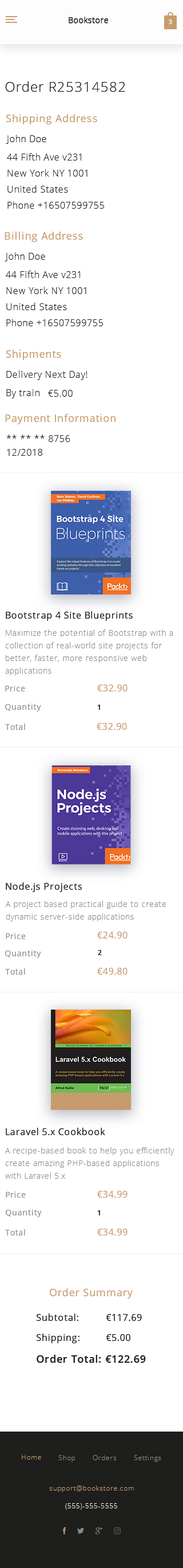
<style>
.page{position:relative;width:183px;height:1568px;background:#ffffff}
.page>*{position:absolute;margin:0}
.t1{font:13.8px "OpenSans-Light";letter-spacing:0.05em;color:#181920}
.t2{font:10.3px "OpenSans";letter-spacing:0.05em;color:#c69c6d}
.t3{font:9.2px/16.1px "OpenSans-Light";letter-spacing:0.05em;color:#1e1e1c}
.t4{font:9.2px/18.3px "OpenSans-Light";letter-spacing:0.05em;color:#1e1e1c}
.t5{font:9.2px/13.8px "OpenSans-Light";letter-spacing:0.05em;color:#1e1e1c}
.t6{font:9.2px "OpenSans-Light";letter-spacing:0.05em;color:#1e1e1c}
.t7{font:9.2px "OpenSans";letter-spacing:0.05em;color:#1e1e1c}
.t8{font:8px/12.6px "OpenSans-Light";letter-spacing:0.05em;color:#8c8c8c}
.t9{font:8px "OpenSans";letter-spacing:0.05em;color:#8c8c8c}
.t10{font:9.2px "OpenSans";letter-spacing:0.05em;color:#c69c6d}
.t11{font:6.9px "OpenSans-Semibold";letter-spacing:0.05em;color:#1e1e1c}
.t12{font:10.3px "OpenSans-Semibold";letter-spacing:0.05em;color:#1e1e1c}
</style>
<div class="page">
<p class="t1" style="left:5px;top:81px;width:121px;height:11px">Order R25314582</p>
<p class="t2" style="left:6px;top:114px;width:91px;height:10px">Shipping Address</p>
<p class="t3" style="left:6px;top:135px;width:98px;height:74px"><span class="t4">John Doe<br>44 Fifth Ave v231<br></span>New York NY 1001<br>United States<br>Phone +16507599755</p>
<p class="t2" style="left:5px;top:232px;width:78px;height:10px">Billing Address</p>
<p class="t3" style="left:5px;top:252px;width:98px;height:74px"><span class="t4">John Doe<br>44 Fifth Ave v231<br></span>New York NY 1001<br>United States<br>Phone +16507599755</p>
<p class="t2" style="left:6px;top:350px;width:55px;height:10px">Shipments</p>
<p class="t5" style="left:6px;top:370px;width:82px;height:28px">Delivery Next Day! <span class="t4"><br>By train</span></p>
<p class="t6" style="left:48px;top:390px;width:25px;height:7px">€5.00</p>
<p class="t2" style="left:5px;top:414px;width:111px;height:10px">Payment Information</p>
<p class="t5" style="left:7px;top:435px;width:63px;height:21px">** ** ** 8756<br>12/2018</p>
<p class="t7" style="left:6px;top:611px;width:127px;height:10px">Bootstrap 4 Site Blueprints</p>
<p class="t8" style="left:5px;top:629px;width:168px;height:46px">Maximize the potential of Bootstrap with a collection of real-world site projects for better, faster, more responsive web applications</p>
<p class="t9" style="left:5px;top:685px;width:20px;height:6px">Price</p>
<p class="t10" style="left:97px;top:685px;width:31px;height:6px">€32.90</p>
<p class="t9" style="left:5px;top:703px;width:36px;height:8px">Quantity</p>
<p class="t11" style="left:98px;top:705px;width:2px;height:5px">1</p>
<p class="t9" style="left:5px;top:724px;width:20px;height:6px">Total</p>
<p class="t10" style="left:97px;top:723px;width:30px;height:7px">€32.90</p>
<p class="t7" style="left:6px;top:882px;width:76px;height:10px">Node.js Projects</p>
<p class="t8" style="left:6px;top:901px;width:160px;height:20px">A project based practical guide to create dynamic server-side applications</p>
<p class="t9" style="left:6px;top:933px;width:20px;height:6px">Price</p>
<p class="t10" style="left:97px;top:932px;width:31px;height:7px">€24.90</p>
<p class="t9" style="left:5px;top:950px;width:36px;height:8px">Quantity</p>
<p class="t11" style="left:98px;top:950px;width:4px;height:5px">2</p>
<p class="t9" style="left:5px;top:968px;width:20px;height:7px">Total</p>
<p class="t10" style="left:97px;top:968px;width:31px;height:7px">€49.80</p>
<p class="t7" style="left:6px;top:1128px;width:99px;height:7px">Laravel 5.x Cookbook</p>
<p class="t8" style="left:5px;top:1147px;width:170px;height:32px">A recipe-based book to help you efficiently create amazing PHP-based applications with Laravel 5.x</p>
<p class="t9" style="left:6px;top:1191px;width:20px;height:7px">Price</p>
<p class="t10" style="left:97px;top:1191px;width:31px;height:7px">€34.99</p>
<p class="t9" style="left:6px;top:1209px;width:36px;height:8px">Quantity</p>
<p class="t11" style="left:98px;top:1210px;width:2px;height:5px">1</p>
<p class="t9" style="left:5px;top:1229px;width:20px;height:6px">Total</p>
<p class="t10" style="left:97px;top:1229px;width:31px;height:6px">€34.99</p>
<p class="t2" style="left:50px;top:1288px;width:83px;height:11px">Order Summary</p>
<p class="t7" style="left:37px;top:1313px;width:42px;height:8px">Subtotal:</p>
<p class="t7" style="left:106px;top:1314px;width:36px;height:7px">€117.69</p>
<p class="t7" style="left:37px;top:1334px;width:43px;height:9px">Shipping:</p>
<p class="t7" style="left:106px;top:1334px;width:25px;height:7px">€5.00</p>
<p class="t12" style="left:37px;top:1355px;width:64px;height:8px">Order Total:</p>
<p class="t12" style="left:105px;top:1355px;width:41px;height:8px">€122.69</p>
</div>
